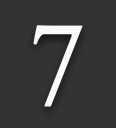
<style>
.page{position:relative;width:116px;height:128px;background:#333333}
.page>*{position:absolute;margin:0}
.t1{font:102px "KoPubWorldBatangMedium";color:#fafafa}
</style>
<div class="page">
<p class="t1" style="left:33px;top:25px;width:50px;height:82px">7</p>
</div>
